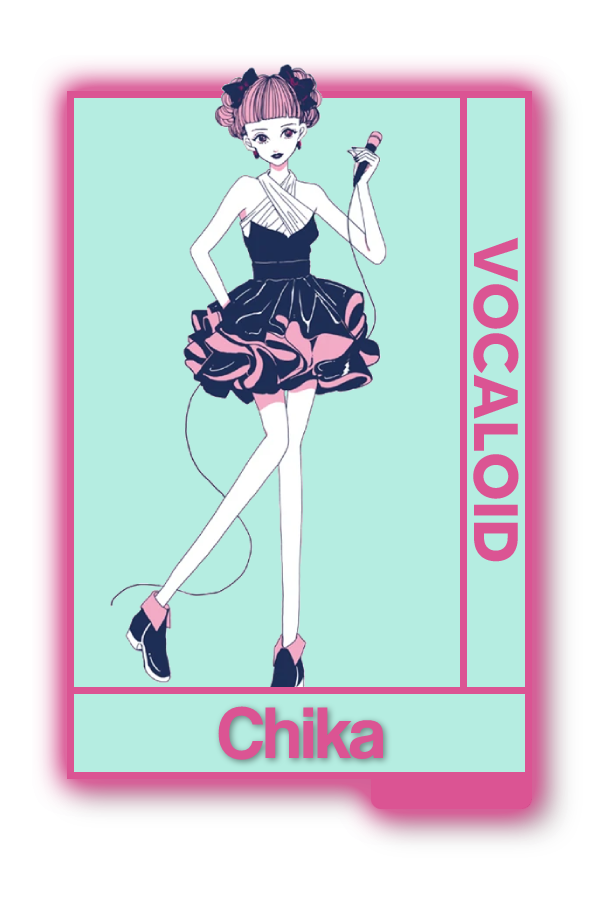
<style>
.page{position:relative;width:600px;height:900px;background:#b5ede1}
.page>*{position:absolute;margin:0}
.t1{font:62.5px "MADETOMMY-Bold";color:#db5493}
.t2{font:75px "CoolveticaRg-Regular";color:#db5493}
</style>
<div class="page">
<p class="t1" style="left:473px;top:237px;width:46px;height:325px;rotate:90deg">VOCALOID</p>
<p class="t2" style="left:218px;top:706px;width:165px;height:54px">Chika</p>
</div>
